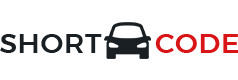
<style>
.page{position:relative;width:238px;height:80px;background:#ffffff}
.page>*{position:absolute;margin:0}
.t1{font:27.7px "Montserrat-Medium";letter-spacing:0.025em;color:#191f23;text-transform:uppercase}
.t2{font:27.7px "Montserrat-Medium";letter-spacing:0.025em;color:#d81416;text-transform:uppercase}
</style>
<div class="page">
<p class="t1" style="left:0px;top:34px;width:239px;height:19px">Short       <span class="t2">Code</span></p>
</div>
